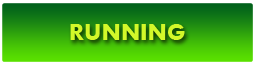
<style>
.page{position:relative;width:256px;height:64px}
.page>*{position:absolute;margin:0}
.t1{font:24px "Aharoni-Bold";color:#d3f829}
</style>
<div class="page">
<p class="t1" style="left:70px;top:24px;width:115px;height:16px">RUNNING</p>
</div>
